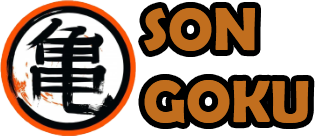
<style>
.page{position:relative;width:315px;height:136px;background:#ffffff}
.page>*{position:absolute;margin:0}
.t1{font:60px "BerlinSansFBDemi-Bold";color:#c16e1e}
</style>
<div class="page">
<p class="t1" style="left:144px;top:8px;width:165px;height:115px">SON <br>GOKU</p>
</div>
